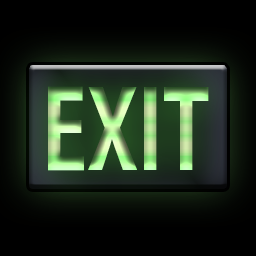
<style>
.page{position:relative;width:256px;height:256px;background:#000000}
.page>*{position:absolute;margin:0}
.t1{font:108.1px "AdobeGothicStd-Bold";scale:0.77 1}
</style>
<div class="page">
<p class="t1" style="left:48px;top:86px;width:161px;height:85px">EXIT</p>
</div>
